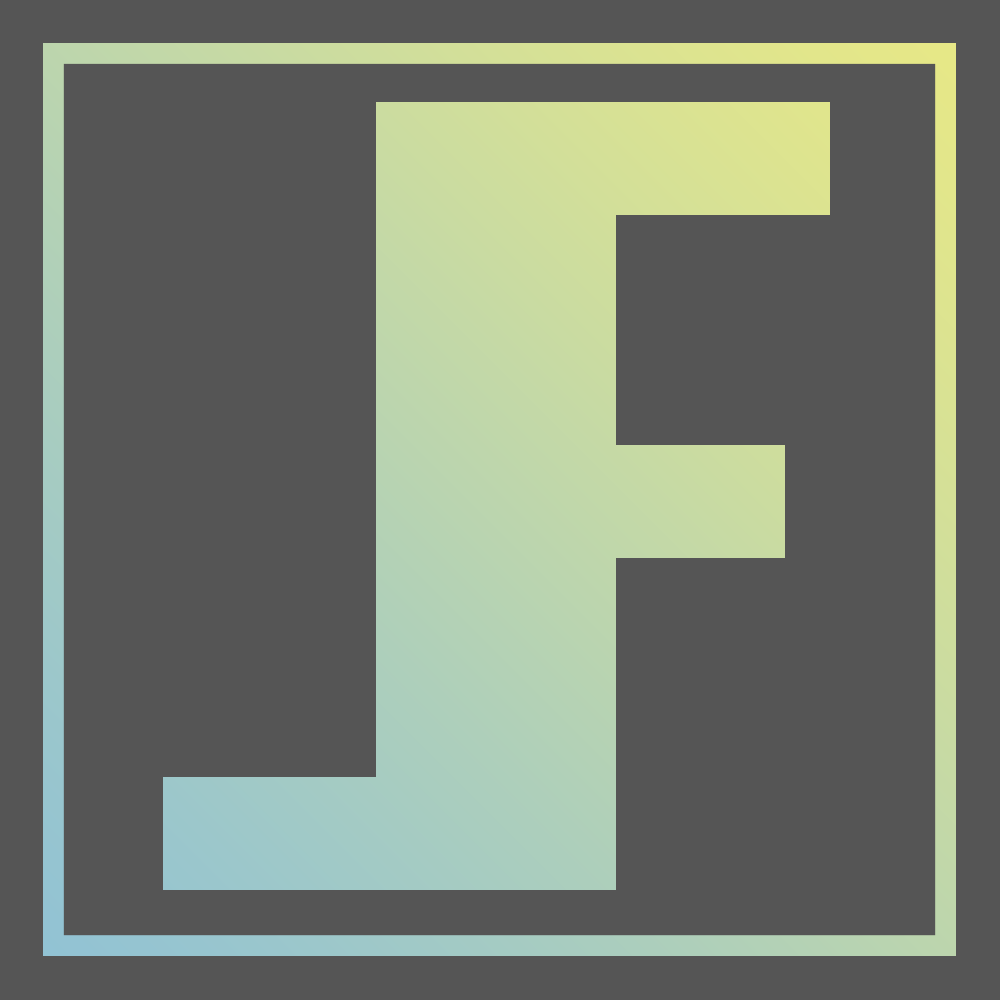
<style>
.page{position:relative;width:1000px;height:1000px;background:#555555}
.page>*{position:absolute;margin:0}
.t1{font:1123.8px "Bebas-Regular";color:#b3d1b5}
.t2{font:1123.8px "Bebas-Regular";color:#c6daa4}
</style>
<div class="page">
<p class="t1" style="left:163px;top:102px;width:333px;height:788px;rotate:180deg">L</p>
<p class="t2" style="left:496px;top:102px;width:334px;height:788px">f</p>
</div>
